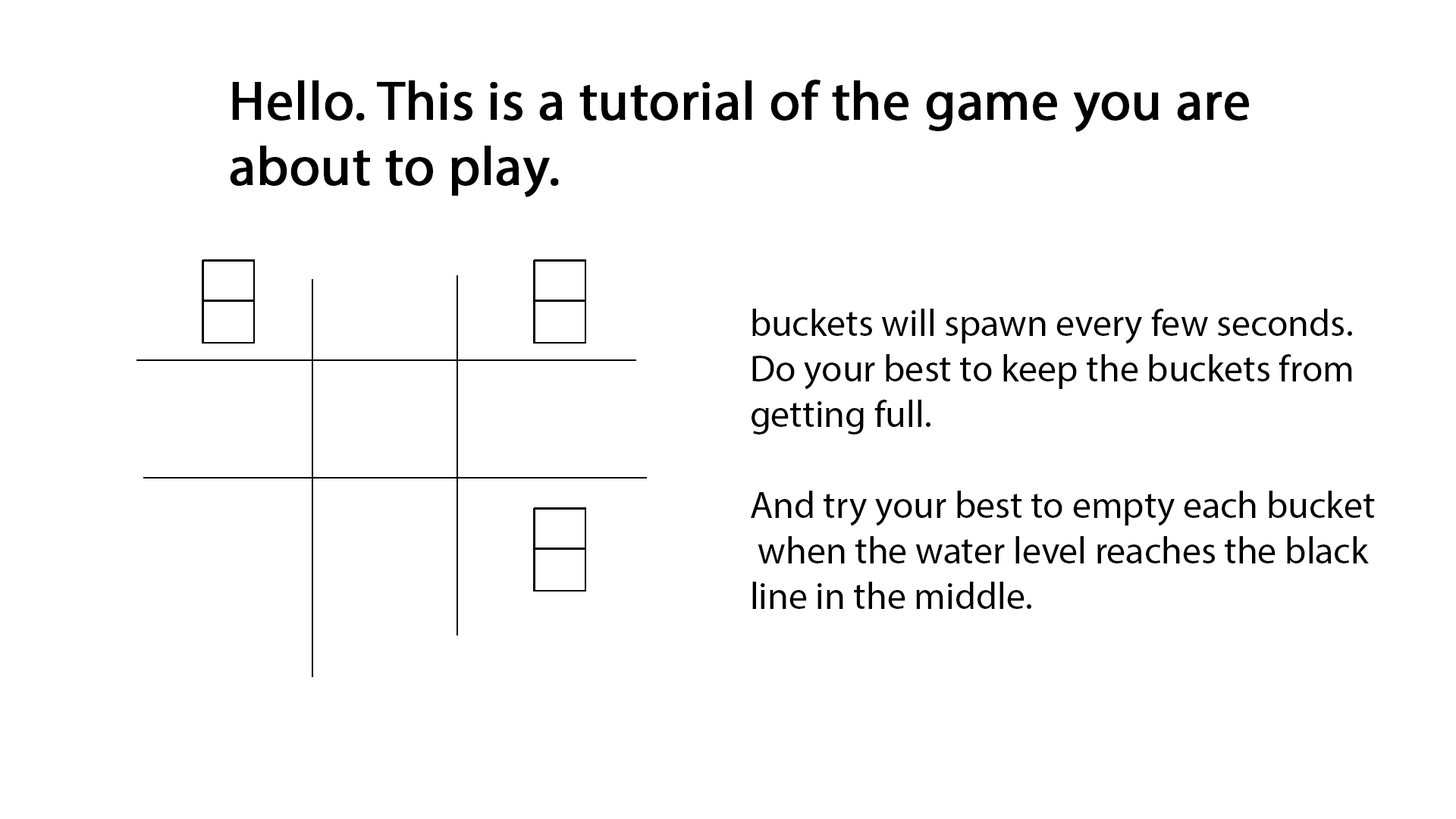
<style>
.page{position:relative;width:1456px;height:819px;background:#ffffff}
.page>*{position:absolute;margin:0}
.t1{font:54.6px "MyriadPro-Regular";color:#000000;font-weight:bold}
.t2{font:37.9px "MyriadPro-Regular";color:#000000}
</style>
<div class="page">
<p class="t1" style="left:230px;top:80px;width:1019px;height:117px">Hello. This is a tutorial of the game you are<br>about to play.</p>
<p class="t2" style="left:751px;top:309px;width:624px;height:300px">buckets will spawn every few seconds.<br>Do your best to keep the buckets from<br>getting full. <br><br>And try your best to empty each bucket<br> when the water level reaches the black <br>line in the middle.</p>
</div>
